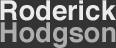
<style>
.page{position:relative;width:116px;height:48px;background:#333333}
.page>*{position:absolute;margin:0}
.t1{font:27.3px "Helvetica-Bold";color:#ffffff}
.t2{font:27.3px "Helvetica-Bold";color:#aeaeae}
</style>
<div class="page">
<p class="t1" style="left:0px;top:0px;width:116px;height:21px;opacity:0.9">Roderick</p>
<p class="t2" style="left:0px;top:22px;width:116px;height:26px">Hodgson</p>
</div>
